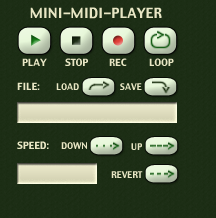
<style>
.page{position:relative;width:216px;height:218px;background:#1c2e15}
.page>*{position:absolute;margin:0}
.t1{font:14px "Charcoal";color:#e8e6c4}
.t2{font:10px "Charcoal";color:#e8e6c4}
.t3{font:9px "Charcoal";color:#e8e6c4}
</style>
<div class="page">
<p class="t1" style="left:30px;top:7px;width:132px;height:12px">MINI-MIDI-PLAYER</p>
<p class="t2" style="left:22px;top:58px;width:25px;height:8px">PLAY</p>
<p class="t2" style="left:65px;top:58px;width:23px;height:8px">STOP</p>
<p class="t2" style="left:109px;top:58px;width:18px;height:8px">REC</p>
<p class="t2" style="left:149px;top:58px;width:25px;height:8px">LOOP</p>
<p class="t2" style="left:17px;top:82px;width:23px;height:8px">FILE:</p>
<p class="t3" style="left:56px;top:83px;width:23px;height:7px">LOAD</p>
<p class="t3" style="left:120px;top:83px;width:22px;height:7px">SAVE</p>
<p class="t2" style="left:17px;top:141px;width:32px;height:8px">SPEED:</p>
<p class="t3" style="left:61px;top:142px;width:26px;height:7px">DOWN</p>
<p class="t3" style="left:131px;top:143px;width:11px;height:7px">UP</p>
<p class="t3" style="left:111px;top:171px;width:32px;height:7px">REVERT</p>
</div>
